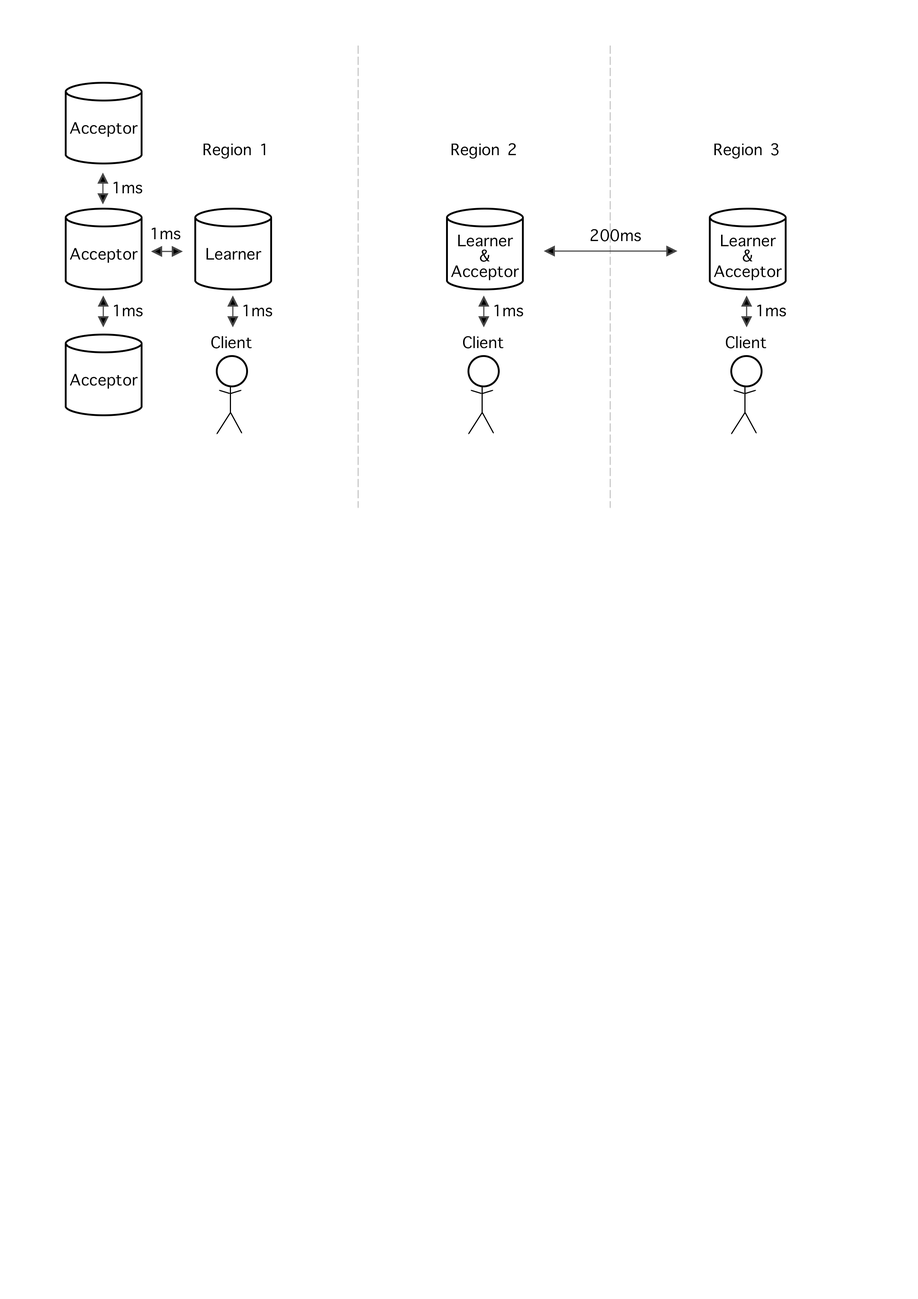
<style>
.page{position:relative;width:918px;height:1299px;background:#ffffff}
.page>*{position:absolute;margin:0}
.t1{font:21.6px "AppleSymbols";color:#000000}
.t2{font:21.6px/15.4px "AppleSymbols";color:#000000}
</style>
<div class="page">
<p class="t1" style="left:70px;top:122px;width:68px;height:15px">Acceptor</p>
<p class="t1" style="left:204px;top:143px;width:61px;height:16px">Region 1</p>
<p class="t1" style="left:452px;top:143px;width:64px;height:16px">Region 2</p>
<p class="t1" style="left:715px;top:143px;width:64px;height:16px">Region 3</p>
<p class="t1" style="left:114px;top:181px;width:29px;height:13px">1ms</p>
<p class="t1" style="left:152px;top:227px;width:29px;height:13px">1ms</p>
<p class="t1" style="left:591px;top:229px;width:50px;height:12px">200ms</p>
<p class="t2" style="left:451px;top:234px;width:68px;height:46px;text-align:center">Learner<br>&amp;<br>Acceptor</p>
<p class="t2" style="left:714px;top:234px;width:68px;height:46px;text-align:center">Learner<br>&amp;<br>Acceptor</p>
<p class="t1" style="left:70px;top:248px;width:68px;height:15px">Acceptor</p>
<p class="t1" style="left:207px;top:248px;width:54px;height:12px">Learner</p>
<p class="t1" style="left:114px;top:304px;width:29px;height:13px">1ms</p>
<p class="t1" style="left:244px;top:304px;width:28px;height:13px">1ms</p>
<p class="t1" style="left:495px;top:304px;width:28px;height:13px">1ms</p>
<p class="t1" style="left:757px;top:304px;width:29px;height:13px">1ms</p>
<p class="t1" style="left:211px;top:336px;width:41px;height:12px">Client</p>
<p class="t1" style="left:463px;top:336px;width:41px;height:12px">Client</p>
<p class="t1" style="left:726px;top:336px;width:40px;height:12px">Client</p>
<p class="t1" style="left:70px;top:374px;width:68px;height:15px">Acceptor</p>
</div>
